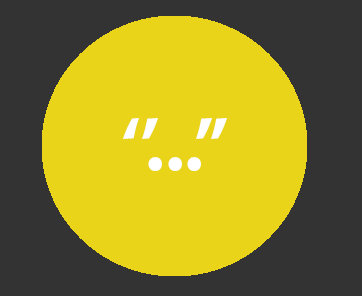
<style>
.page{position:relative;width:362px;height:296px;background:#e9d419}
.page>*{position:absolute;margin:0}
.t1{font:75px "MyriadPro-Bold";color:#ffffff}
</style>
<div class="page">
<p class="t1" style="left:123px;top:118px;width:104px;height:53px">‘’...’’</p>
</div>
